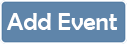
<style>
.page{position:relative;width:127px;height:44px;background:#5f85aa}
.page>*{position:absolute;margin:0}
.t1{font:25px "BerlinSansFB-Reg";color:#ffffff}
</style>
<div class="page">
<p class="t1" style="left:7px;top:13px;width:110px;height:17px">Add Event</p>
</div>
